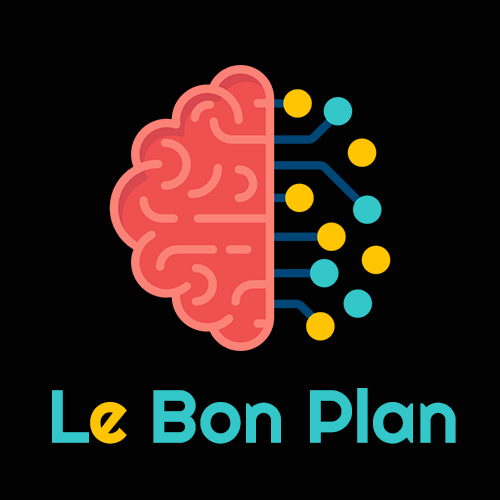
<style>
.page{position:relative;width:500px;height:500px;background:#020202}
.page>*{position:absolute;margin:0}
.t1{font:75px "Righteous-Regular";color:#33c7ca}
.t2{font:75px "Righteous-Regular";color:#ffc502}
</style>
<div class="page">
<p class="t1" style="left:52px;top:388px;width:404px;height:56px">L<span class="t2">e</span> Bon Plan</p>
</div>
